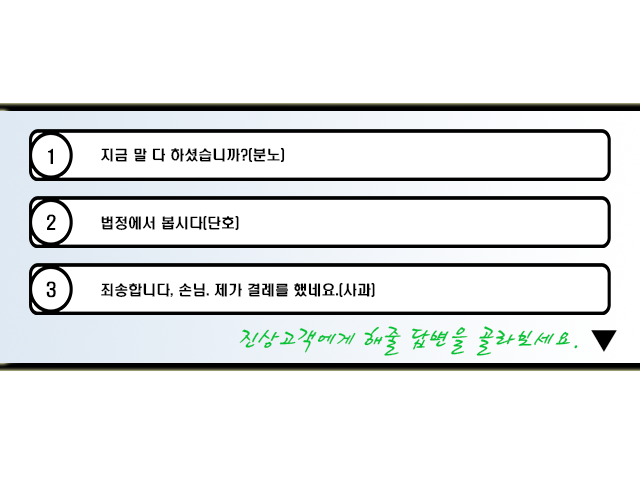
<style>
.page{position:relative;width:640px;height:480px;background:#ffffff}
.page>*{position:absolute;margin:0}
.t1{font:18px "H2hdrM";color:#000000}
.t2{font:14px "H2hdrM";color:#000000}
.t3{font:30px "HaanCjaB";color:#03c435}
</style>
<div class="page">
<p class="t1" style="left:48px;top:148px;width:5px;height:16px">1</p>
<p class="t2" style="left:101px;top:147px;width:274px;height:151px">지금 말 다 하셨습니까?(분노)<br><br><br><br>법정에서 봅시다(단호)<br><br><br><br>죄송합니다, 손님. 제가 결례를 했네요.(사과)</p>
<p class="t1" style="left:47px;top:214px;width:9px;height:16px">2</p>
<p class="t1" style="left:46px;top:281px;width:10px;height:17px">3</p>
<p class="t3" style="left:239px;top:326px;width:339px;height:30px">진상고객에게 해줄 답변을 골라보세요.</p>
</div>
